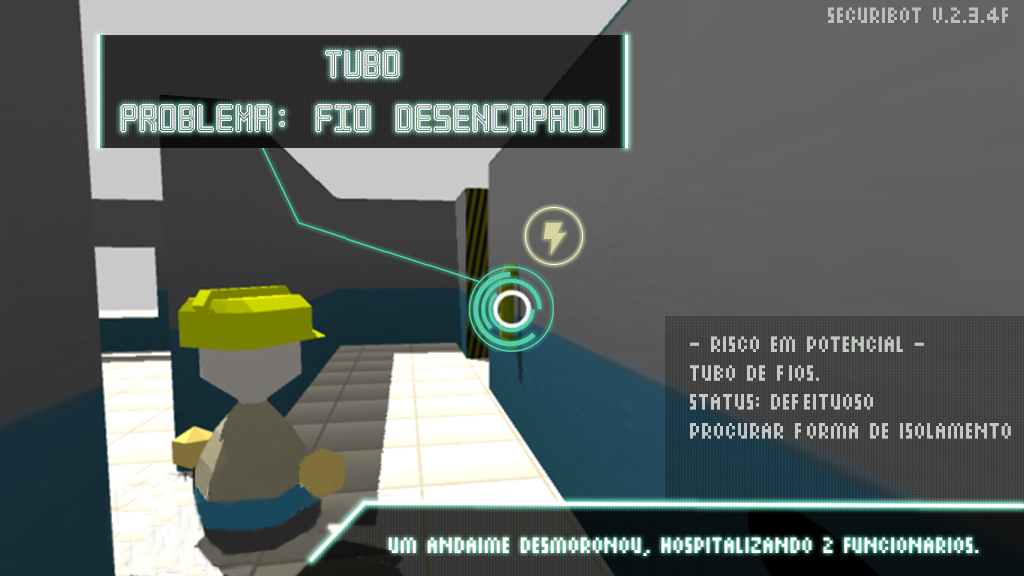
<style>
.page{position:relative;width:1024px;height:576px}
.page>*{position:absolute;margin:0}
.t1{font:24px "PixelSix14";color:#bcbcbc}
.t2{font:45.1px "NeonPixel-7";color:#ffffff}
.t3{font:24px "PixelSix14";color:#c2c2c2}
</style>
<div class="page">
<p class="t1" style="left:828px;top:7px;width:180px;height:16px">Securibot V.2.3.4f</p>
<p class="t2" style="left:120px;top:50px;width:485px;height:83px;text-align:center">Tubo<br>Problema: Fio Desencapado</p>
<p class="t3" style="left:690px;top:336px;width:321px;height:103px">- Risco em potencial -<br>Tubo de fios.<br>Status: Defeituoso<br>Procurar forma de isolamento</p>
</div>
